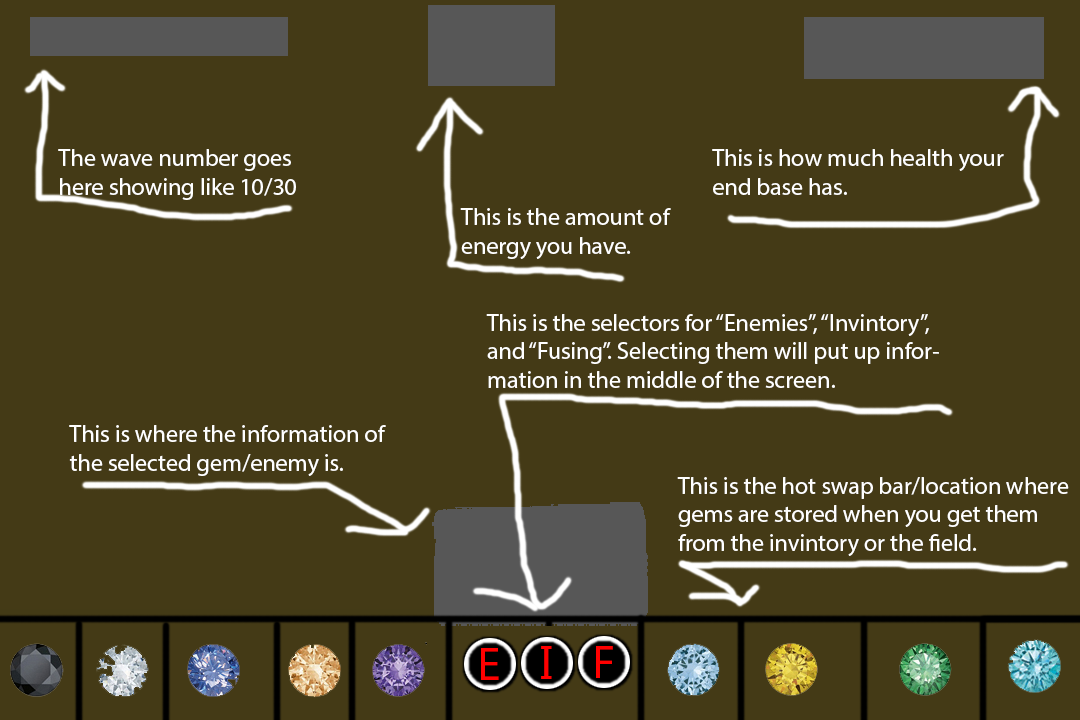
<style>
.page{position:relative;width:1080px;height:720px;background:#443a16}
.page>*{position:absolute;margin:0}
.t1{font:24px "MyriadPro-Regular";color:#ffffff}
</style>
<div class="page">
<p class="t1" style="left:58px;top:149px;width:238px;height:51px">The wave number goes<br>here showing like 10/30</p>
<p class="t1" style="left:712px;top:149px;width:292px;height:46px">This is how much health your end base has.</p>
<p class="t1" style="left:460px;top:208px;width:211px;height:51px">This is the amount of energy you have.</p>
<p class="t1" style="left:486px;top:314px;width:453px;height:74px">This is the selectors for “Enemies”, “Invintory”,  and “Fusing”. Selecting them will put up information in the middle of the screen.</p>
<p class="t1" style="left:69px;top:425px;width:317px;height:51px">This is where the information of the selected gem/enemy is.</p>
<p class="t1" style="left:677px;top:477px;width:392px;height:79px">This is the hot swap bar/location where gems are stored when you get them from the invintory or the field.</p>
</div>
